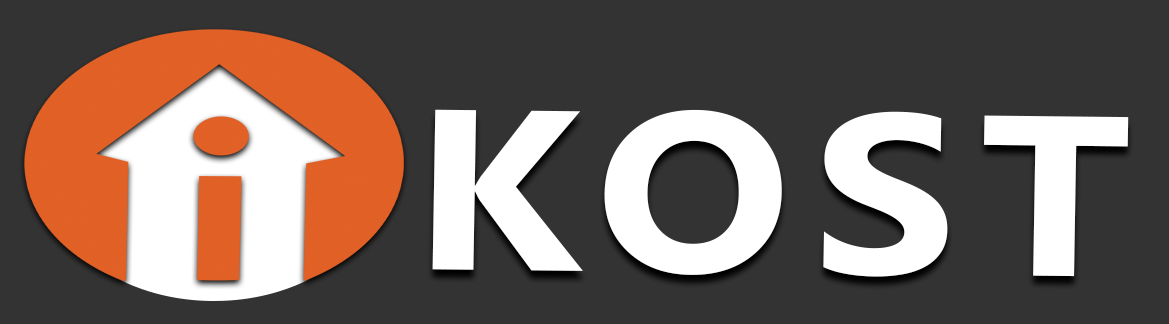
<style>
.page{position:relative;width:1169px;height:324px;background:#333333}
.page>*{position:absolute;margin:0}
.t1{font:227.8px "SegoeUI-Bold";letter-spacing:0.085em;color:#ffffff;scale:1.13 1}
</style>
<div class="page">
<p class="t1" style="left:432px;top:109px;width:697px;height:168px;rotate:1deg">KOST</p>
</div>
